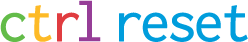
<style>
.page{position:relative;width:248px;height:42px;background:#ffffff}
.page>*{position:absolute;margin:0}
.t1{font:60px "Inconsolata";letter-spacing:-0.08em;color:#009ddc;font-weight:bold}
.t2{font:60px "Inconsolata";letter-spacing:-0.08em;color:#63bc49;font-weight:bold}
.t3{font:60px "Inconsolata";letter-spacing:-0.08em;color:#fdba27;font-weight:bold}
.t4{font:60px "Inconsolata";letter-spacing:-0.08em;color:#e03c40;font-weight:bold}
.t5{font:60px "Inconsolata";letter-spacing:-0.08em;color:#963d97;font-weight:bold}
</style>
<div class="page">
<p class="t1" style="left:0px;top:0px;width:248px;height:42px"><span class="t2">c</span><span class="t3">t</span><span class="t4">r</span><span class="t5">l</span>reset</p>
</div>
